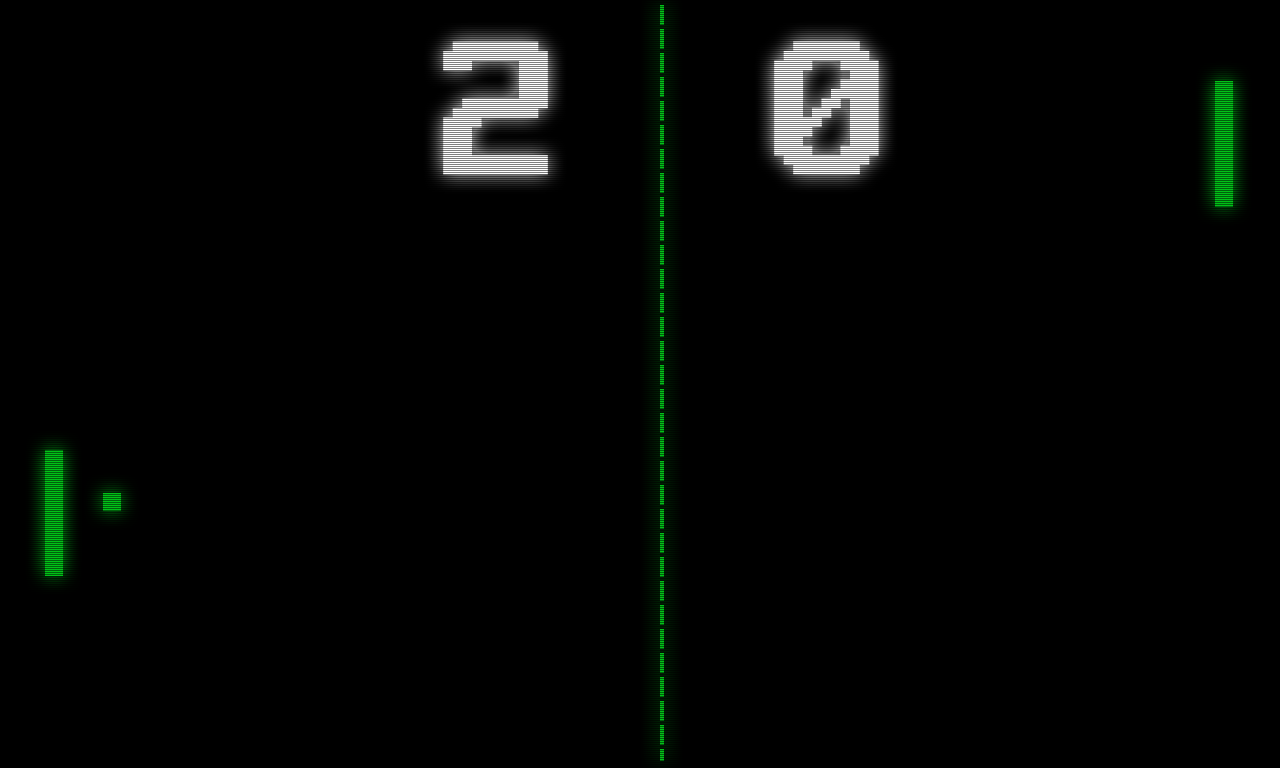
<style>
.page{position:relative;width:1280px;height:768px;background:#000000}
.page>*{position:absolute;margin:0}
.t1{font:170px "KindlyRewind"}
</style>
<div class="page">
<p class="t1" style="left:443px;top:41px;width:105px;height:134px">2</p>
<p class="t1" style="left:774px;top:41px;width:105px;height:134px">0</p>
</div>
